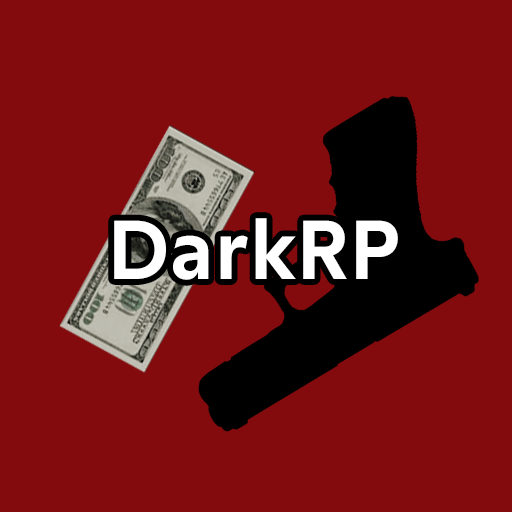
<style>
.page{position:relative;width:512px;height:512px;background:#830b0d}
.page>*{position:absolute;margin:0}
.t1{font:84.7px "TechnaSans-Regular";letter-spacing:0.04em;color:#ffffff}
</style>
<div class="page">
<p class="t1" style="left:114px;top:218px;width:284px;height:62px">DarkRP</p>
</div>
